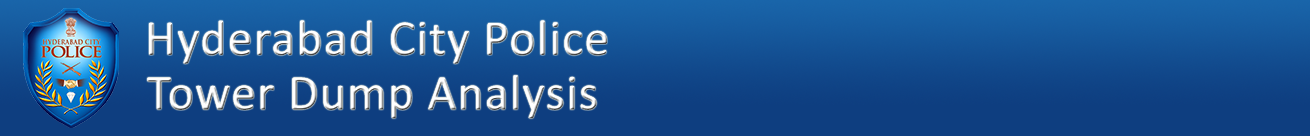
<style>
.page{position:relative;width:1310px;height:136px;background:#0e3e80}
.page>*{position:absolute;margin:0}
.t1{font:50px "Calibri";letter-spacing:0.025em;color:#ffffff}
</style>
<div class="page">
<p class="t1" style="left:149px;top:20px;width:458px;height:44px">Hyderabad City Police</p>
<p class="t1" style="left:147px;top:75px;width:450px;height:44px">Tower Dump Analysis</p>
</div>
